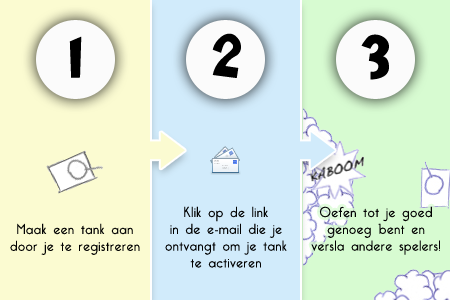
<style>
.page{position:relative;width:450px;height:300px;background:#fbfbd1}
.page>*{position:absolute;margin:0}
.t1{font:60px "Cheri";letter-spacing:0.06em;color:#000000}
.t2{font:14px "BelleroseLight";letter-spacing:0.06em;color:#020202}
</style>
<div class="page">
<p class="t1" style="left:69px;top:36px;width:13px;height:42px">1</p>
<p class="t1" style="left:212px;top:33px;width:29px;height:45px">2</p>
<p class="t1" style="left:361px;top:34px;width:28px;height:46px">3</p>
<p class="t2" style="left:165px;top:206px;width:122px;height:62px;text-align:center">Klik op de link<br>in de e-mail die je<br>ontvangt om je tank<br>te activeren</p>
<p class="t2" style="left:311px;top:206px;width:129px;height:49px;text-align:center">Oefen tot je goed<br>genoeg bent en<br>versla andere spelers!</p>
<p class="t2" style="left:10px;top:223px;width:130px;height:32px;text-align:center">Maak een tank aan<br>door je te registreren</p>
</div>
